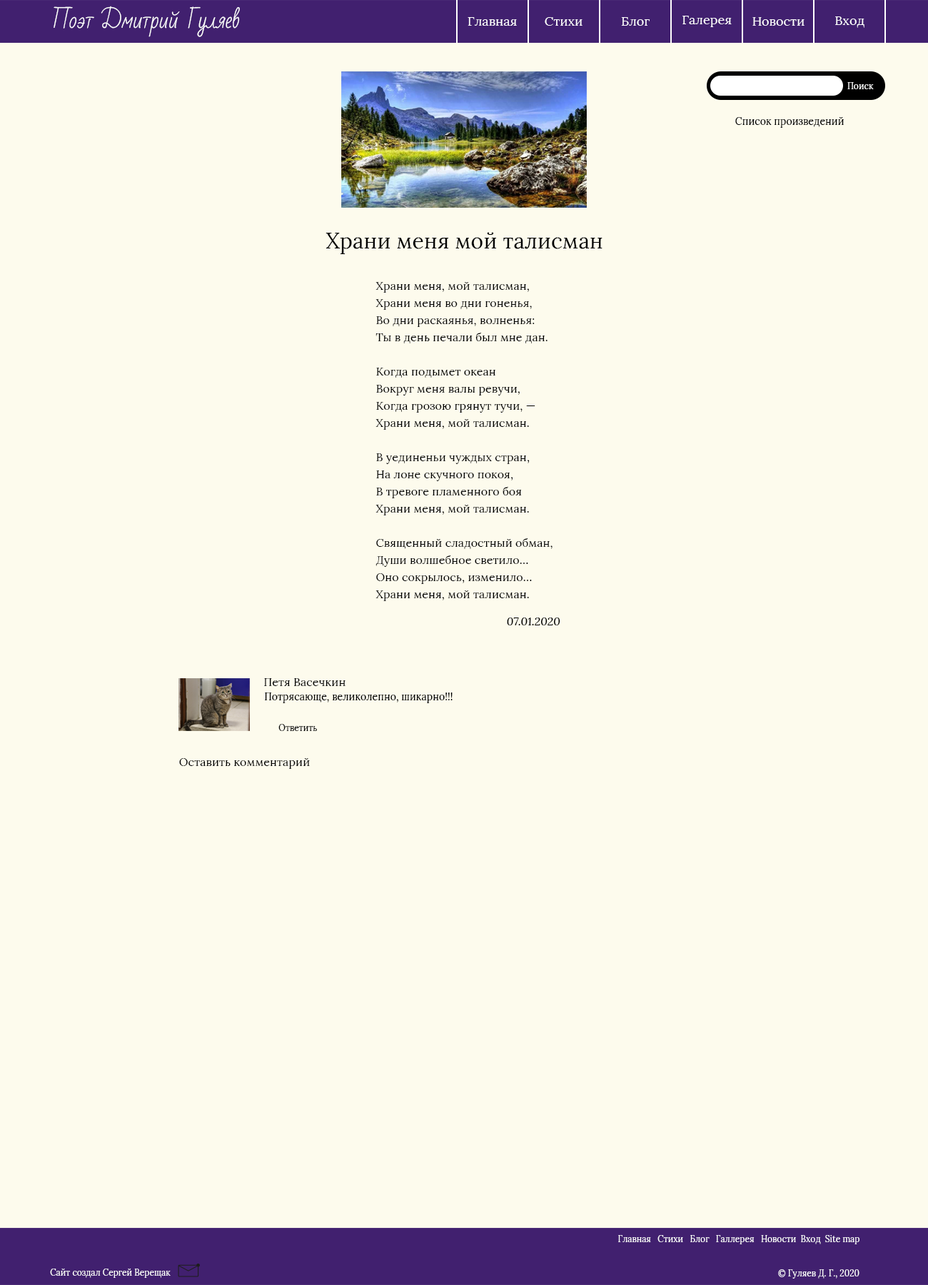
<style>
.page{position:relative;width:928px;height:1285px;background:#fdfbed}
.page>*{position:absolute;margin:0}
.t1{font:21.4px "BadScript-Regular";color:#ffffff}
.t2{font:12.8px "Lora-Regular";color:#ffffff}
.t3{font:8.6px "Lora-Regular";letter-spacing:0.005em;color:#ffffff}
.t4{font:10px "Lora-Regular";letter-spacing:0.005em;color:#000000}
.t5{font:21.4px "Lora-Regular";letter-spacing:0.005em;color:#000000}
.t6{font:11.4px/17.1px "Lora-Regular";letter-spacing:0.005em;color:#000000}
.t7{font:11.4px "Lora-Italic";letter-spacing:0.005em;color:#000000}
.t8{font:11.4px "Lora-Regular";letter-spacing:0.005em;color:#000000}
.t9{font:8.6px "Lora-Regular";letter-spacing:0.005em;color:#000000}
.t10{font:8.6px "Lora-Regular";color:#ffffff}
</style>
<div class="page">
<p class="t1" style="left:54px;top:6px;width:186px;height:31px">Поэт Дмитрий Гуляев</p>
<p class="t2" style="left:468px;top:17px;width:49px;height:9px">Главная</p>
<p class="t2" style="left:545px;top:17px;width:38px;height:9px">Стихи</p>
<p class="t2" style="left:621px;top:17px;width:29px;height:9px">Блог</p>
<p class="t2" style="left:682px;top:16px;width:50px;height:11px">Галерея</p>
<p class="t2" style="left:752px;top:17px;width:53px;height:9px">Новости</p>
<p class="t2" style="left:835px;top:16px;width:29px;height:12px">Вход</p>
<p class="t3" style="left:847px;top:82px;width:27px;height:7px">Поиск</p>
<p class="t4" style="left:735px;top:117px;width:109px;height:11px">Список произведений</p>
<p class="t5" style="left:326px;top:232px;width:276px;height:22px">Храни меня мой талисман</p>
<p class="t6" style="left:375px;top:282px;width:178px;height:319px">Храни меня, мой талисман,<br>Храни меня во дни гоненья,<br>Во дни раскаянья, волненья:<br>Ты в день печали был мне дан.<br><br>Когда подымет океан<br>Вокруг меня валы ревучи,<br>Когда грозою грянут тучи, —<br>Храни меня, мой талисман.<br><br>В уединеньи чуждых стран,<br>На лоне скучного покоя,<br>В тревоге пламенного боя<br>Храни меня, мой талисман.<br><br>Священный сладостный обман,<br>Души волшебное светило…<br>Оно сокрылось, изменило…<br>Храни меня, мой талисман.</p>
<p class="t7" style="left:507px;top:617px;width:53px;height:8px">07.01.2020</p>
<p class="t8" style="left:264px;top:678px;width:82px;height:8px">Петя Васечкин</p>
<p class="t4" style="left:264px;top:692px;width:189px;height:11px">Потрясающе, великолепно, шикарно!!!</p>
<p class="t9" style="left:278px;top:724px;width:39px;height:7px">Ответить</p>
<p class="t8" style="left:179px;top:758px;width:131px;height:11px">Оставить комментарий</p>
<p class="t10" style="left:618px;top:1235px;width:241px;height:9px">Главная   Стихи   Блог   Галлерея   Новости  Вход  Site map</p>
<p class="t10" style="left:50px;top:1269px;width:121px;height:9px">Сайт создал Сергей Верещак</p>
<p class="t10" style="left:778px;top:1269px;width:81px;height:10px">© Гуляев Д. Г., 2020</p>
</div>
